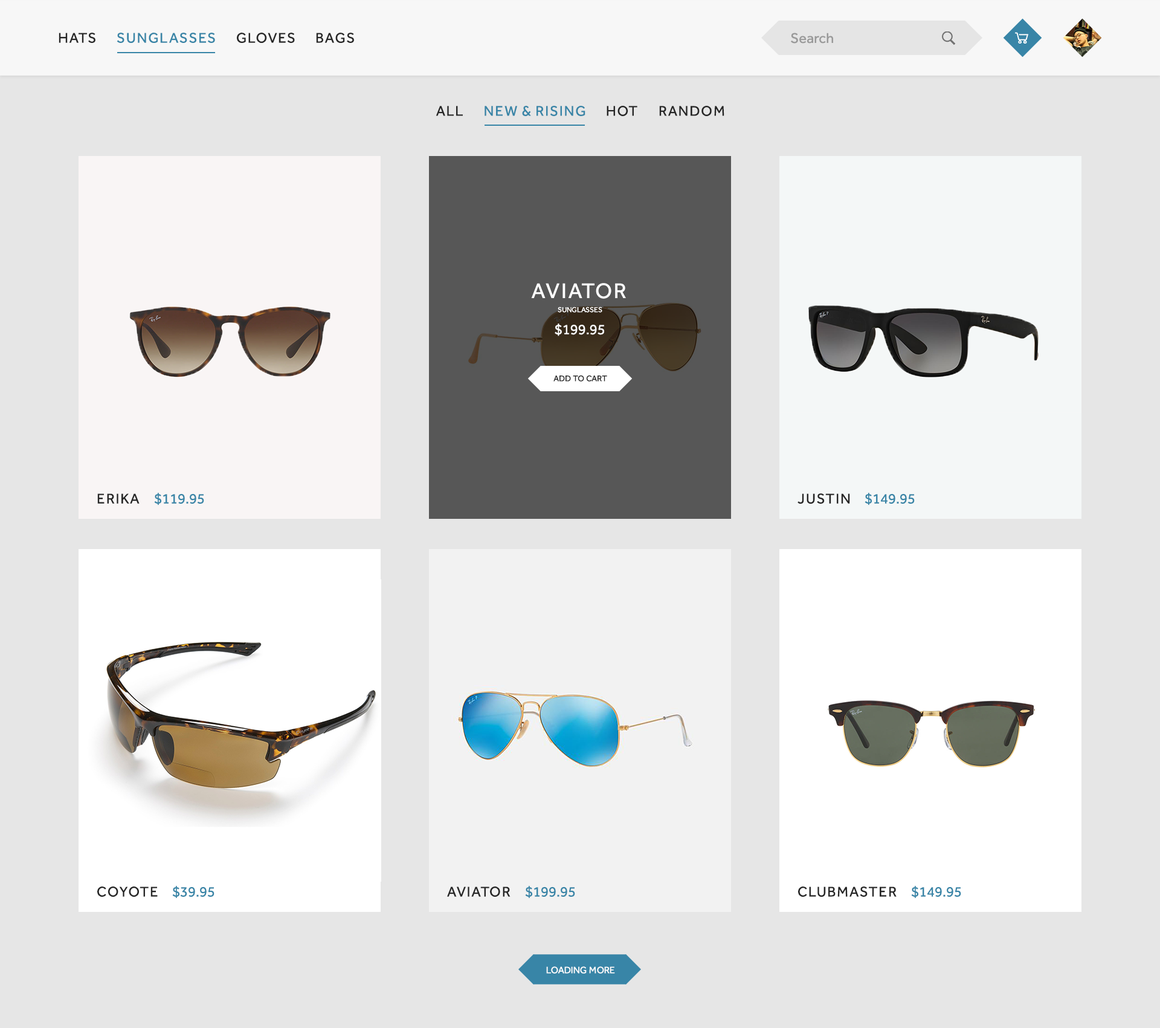
<style>
.page{position:relative;width:1160px;height:1028px;background:#e6e6e6}
.page>*{position:absolute;margin:0}
.t1{font:14.5px "Effra-Regular";letter-spacing:0.075em;color:#262626}
.t2{font:14.5px "Effra-Regular";letter-spacing:0.075em;color:#3885a7}
.t3{font:14.5px "Effra-Regular";color:#999999}
.t4{font:21.8px "Effra-Regular";letter-spacing:0.075em;color:#ffffff}
.t5{font:7.3px "Effra-Regular";color:#ffffff}
.t6{font:14.5px "Effra-Regular";color:#ffffff}
.t7{font:8.5px "Effra-Regular";color:#262626}
.t8{font:14.5px "Effra-Regular";color:#3885a7}
.t9{font:9.7px "Effra-Regular";color:#ffffff}
</style>
<div class="page">
<p class="t1" style="left:59px;top:33px;width:36px;height:10px">HATS</p>
<p class="t2" style="left:117px;top:33px;width:98px;height:10px">SUNGLASSES</p>
<p class="t1" style="left:237px;top:33px;width:58px;height:10px">GLOVES</p>
<p class="t1" style="left:316px;top:33px;width:38px;height:10px">BAGS</p>
<p class="t3" style="left:791px;top:33px;width:43px;height:11px">Search</p>
<p class="t1" style="left:436px;top:106px;width:27px;height:10px">ALL</p>
<p class="t2" style="left:485px;top:106px;width:101px;height:10px">NEW &amp; RISING</p>
<p class="t1" style="left:607px;top:106px;width:31px;height:10px">HOT</p>
<p class="t1" style="left:659px;top:106px;width:66px;height:10px">RANDOM</p>
<p class="t4" style="left:531px;top:283px;width:95px;height:16px">AVIATOR</p>
<p class="t5" style="left:558px;top:306px;width:45px;height:6px">SUNGLASSES</p>
<p class="t6" style="left:555px;top:323px;width:49px;height:13px">$199.95</p>
<p class="t7" style="left:554px;top:375px;width:53px;height:6px">ADD TO CART</p>
<p class="t1" style="left:97px;top:493px;width:43px;height:10px">ERIKA</p>
<p class="t8" style="left:154px;top:493px;width:50px;height:12px">$119.95</p>
<p class="t1" style="left:798px;top:493px;width:52px;height:10px">JUSTIN</p>
<p class="t8" style="left:865px;top:493px;width:50px;height:12px">$149.95</p>
<p class="t1" style="left:97px;top:886px;width:61px;height:10px">COYOTE</p>
<p class="t8" style="left:172px;top:885px;width:43px;height:13px">$39.95</p>
<p class="t1" style="left:447px;top:886px;width:64px;height:10px">AVIATOR</p>
<p class="t8" style="left:525px;top:885px;width:50px;height:13px">$199.95</p>
<p class="t1" style="left:798px;top:886px;width:99px;height:10px">CLUBMASTER</p>
<p class="t8" style="left:911px;top:885px;width:51px;height:13px">$149.95</p>
<p class="t9" style="left:546px;top:966px;width:69px;height:7px">LOADING MORE</p>
</div>
